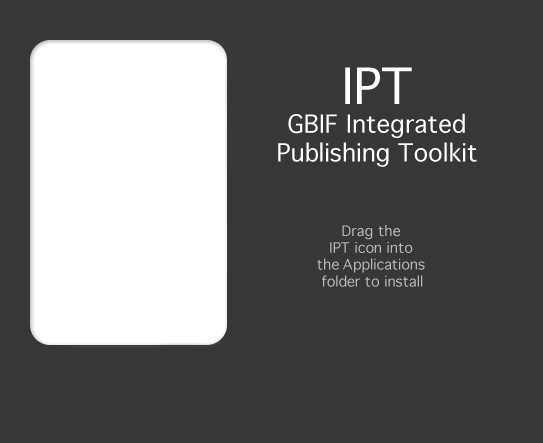
<style>
.page{position:relative;width:543px;height:443px;background:#373737}
.page>*{position:absolute;margin:0}
.t1{font:24px "Geneva";color:#ffffff}
.t2{font:48px "Geneva";color:#ffffff}
.t3{font:14px "Geneva";color:#bbbbbb}
</style>
<div class="page">
<p class="t1" style="left:278px;top:67px;width:199px;height:100px;text-align:center"><span class="t2">IPT<br></span>GBIF Integrated<br>Publishing Toolkit</p>
<p class="t3" style="left:317px;top:225px;width:108px;height:62px;text-align:center">Drag the<br>IPT icon into<br>the Applications<br>folder to install</p>
</div>
